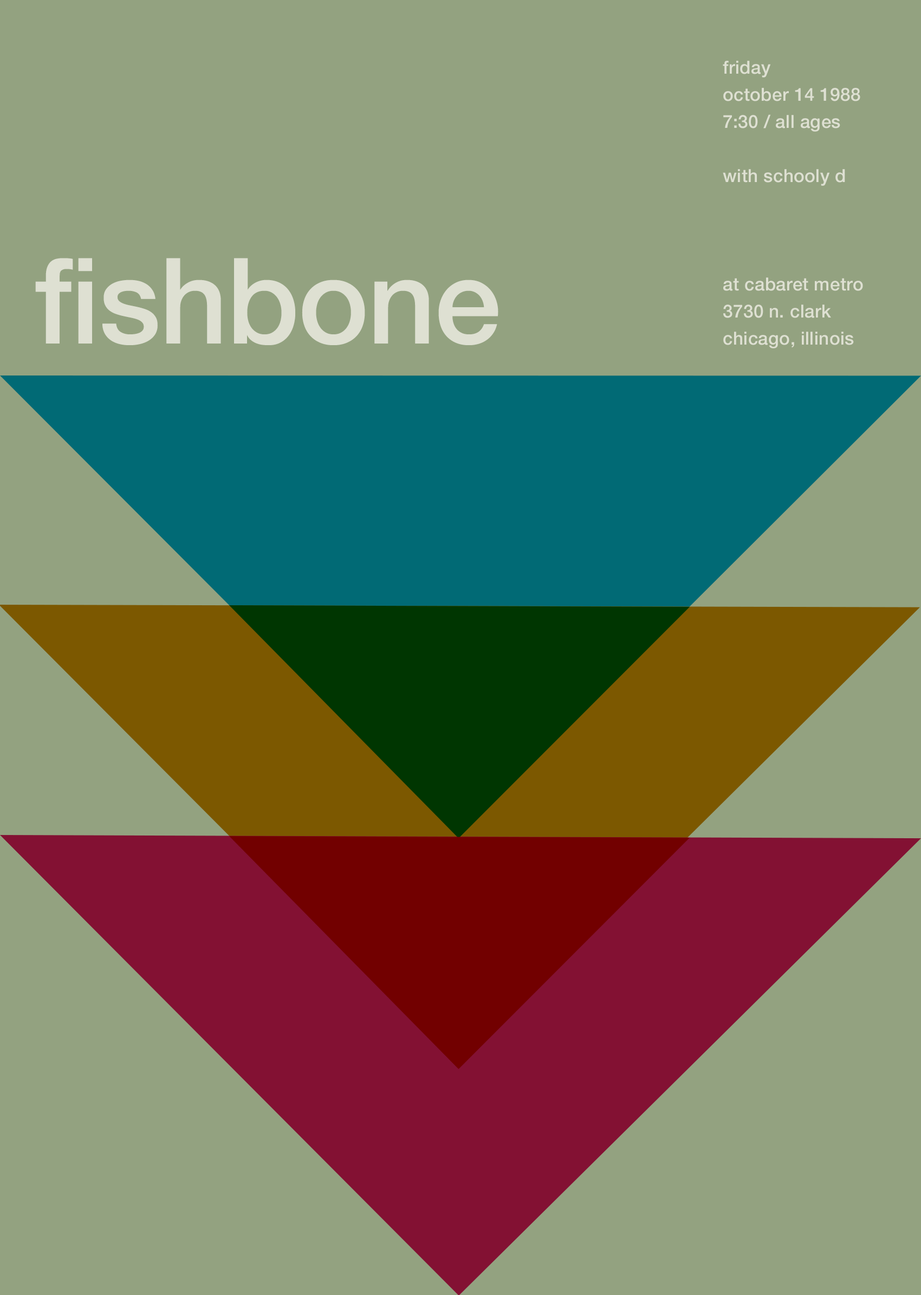
<style>
.page{position:relative;width:921px;height:1295px;background:#93a280}
.page>*{position:absolute;margin:0}
.t1{font:18.1px/27.1px "HelveticaNeue-Medium";letter-spacing:0.01em;color:#dee0d2}
.t2{font:119.6px "HelveticaNeue-Medium";letter-spacing:-0.012em;color:#dee0d2}
</style>
<div class="page">
<p class="t1" style="left:723px;top:61px;width:140px;height:287px">friday<br>october 14 1988<br>7:30 / all ages<br><br>with schooly d<br><br><br><br>at cabaret metro<br>3730 n. clark<br>chicago, illinois</p>
<p class="t2" style="left:35px;top:258px;width:463px;height:87px">fishbone</p>
</div>
